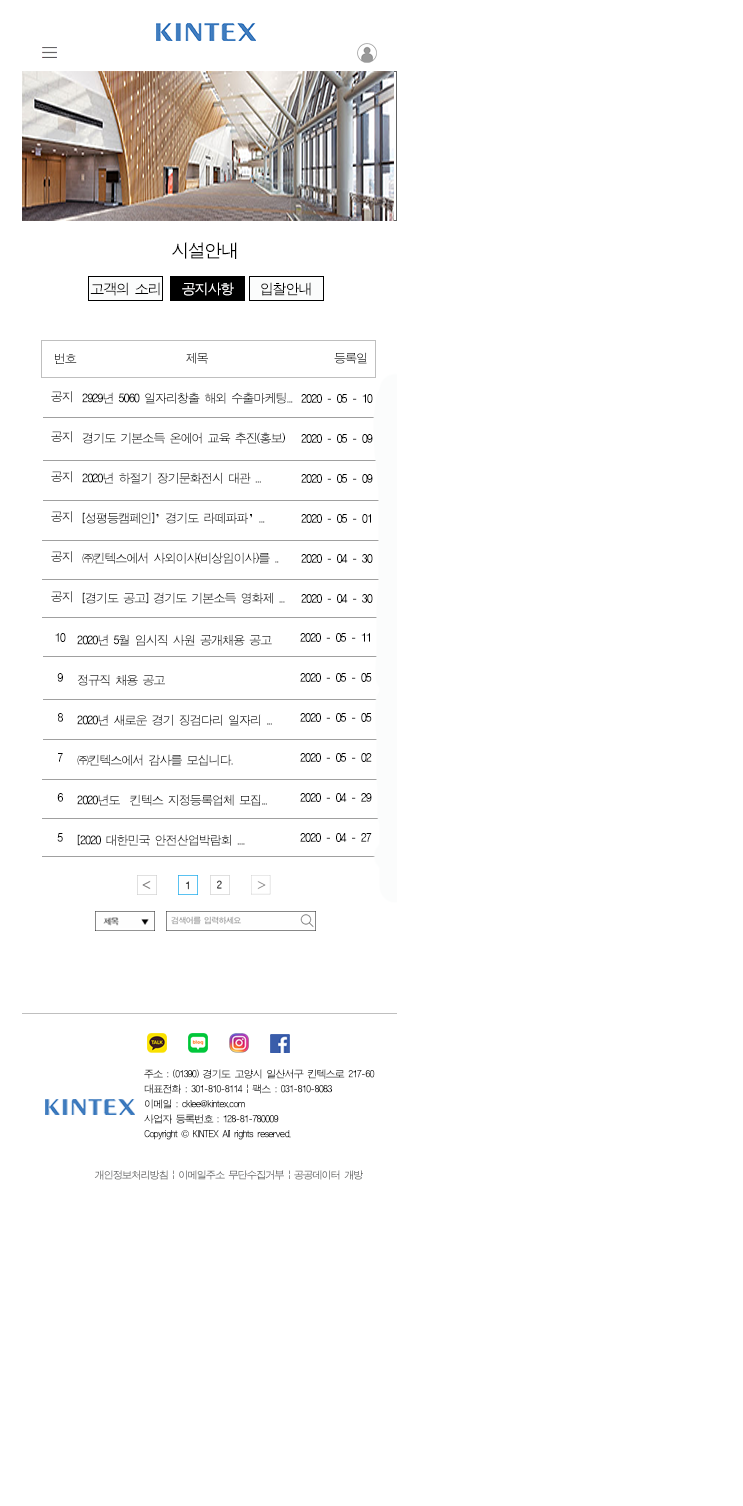
<style>
.page{position:relative;width:743px;height:1506px;background:#ffffff}
.page>*{position:absolute;margin:0}
.t1{font:18px "ÈÞ¸Õ°íµñ";letter-spacing:-0.08em;color:#010101}
.t2{font:14px "ÈÞ¸Õ°íµñ";letter-spacing:-0.08em;color:#070707}
.t3{font:14px "ÈÞ¸Õ°íµñ";letter-spacing:-0.08em;color:#000000}
.t4{font:14px "ÈÞ¸Õ°íµñ";letter-spacing:-0.08em;color:#fdfcfc}
.t5{font:12px "ÈÞ¸Õ°íµñ";letter-spacing:-0.08em}
.t6{font:12px/40px "ÈÞ¸Õ°íµñ";letter-spacing:-0.08em}
.t7{font:12px/40px "ÈÞ¸Õ°íµñ";letter-spacing:-0.08em;color:#000000}
.t8{font:10px/15px "ÈÞ¸Õ°íµñ";letter-spacing:-0.08em;color:#020202}
.t9{font:10px/15px "Gulim";letter-spacing:-0.08em;color:#020202}
.t10{font:10px "ÈÞ¸Õ°íµñ";letter-spacing:-0.08em}
</style>
<div class="page">
<p class="t1" style="left:172px;top:242px;width:65px;height:17px">시설안내</p>
<p class="t2" style="left:90px;top:282px;width:70px;height:14px">고객의<span class="t3"> 소리</span></p>
<p class="t4" style="left:182px;top:282px;width:52px;height:14px">공지사항</p>
<p class="t3" style="left:261px;top:282px;width:50px;height:14px">입찰안내</p>
<p class="t5" style="left:55px;top:353px;width:22px;height:11px">번호</p>
<p class="t5" style="left:186px;top:352px;width:22px;height:12px">제목</p>
<p class="t5" style="left:334px;top:352px;width:33px;height:12px">등록일</p>
<p class="t6" style="left:51px;top:391px;width:21px;height:212px;text-align:center">공지<br>공지<br>공지<br>공지<br>공지<br>공지</p>
<p class="t7" style="left:82px;top:392px;width:211px;height:212px">2929년 5060 일자리창출 해외 수출마케팅...<br>경기도 기본소득 온에어 교육 추진(홍보)<br>2020년 하절기 장기문화전시 대관 ...<br>[성평등캠페인]’경기도 라떼파파’...<br>㈜킨텍스에서 사외이사(비상임이사)를 ..<br>[경기도 공고] 경기도 기본소득 영화제 ...</p>
<p class="t7" style="left:301px;top:394px;width:72px;height:209px">2020 - 05 - 10<br>2020 - 05 - 09<br>2020 - 05 - 09<br>2020 - 05 - 01<br>2020 - 04 - 30<br>2020 - 04 - 30</p>
<p class="t7" style="left:55px;top:633px;width:11px;height:209px;text-align:center">10<br>9<br>8<br>7<br>6<br>5</p>
<p class="t7" style="left:77px;top:634px;width:195px;height:212px">2020년 5월 임시직 사원 공개채용 공고<br>정규직 채용 공고<br>2020년 새로운 경기 징검다리 일자리 ...<br>㈜킨텍스에서 감사를 모십니다.<br>2020년도  킨텍스 지정등록업체 모집...<br>[2020 대한민국 안전산업박람회 ....</p>
<p class="t7" style="left:300px;top:633px;width:72px;height:209px">2020 - 05 - 11<br>2020 - 05 - 05<br>2020 - 05 - 05<br>2020 - 05 - 02<br>2020 - 04 - 29<br>2020 - 04 - 27</p>
<p class="t8" style="left:144px;top:1069px;width:231px;height:71px">주소 : (01390) 경기도 고양시 일산서구 킨텍스로 217-60<br>대표전화 : 301-810-8114 | 팩스 : 031-810-8083<br>이메일 : cklee@kintex.com <br>사업자 등록번호 : 128-81-780009<br>Copyright <span class="t9">©</span> KINTEX All rights reserved.</p>
<p class="t10" style="left:94px;top:1170px;width:269px;height:10px">개인정보처리방침 | 이메일주소 무단수집거부 | 공공데이터 개방</p>
</div>
